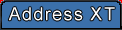
<style>
.page{position:relative;width:122px;height:30px;background:#3b70aa}
.page>*{position:absolute;margin:0}
.t1{font:18px "ArialMT";letter-spacing:0.075em;color:#ffffff}
</style>
<div class="page">
<p class="t1" style="left:8px;top:7px;width:107px;height:14px">Address XT</p>
</div>
